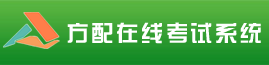
<style>
.page{position:relative;width:269px;height:65px}
.page>*{position:absolute;margin:0}
.t1{font:22.5px "FZZYJW--GB1-0";letter-spacing:0.1em;color:#ffffff}
</style>
<div class="page">
<p class="t1" style="left:67px;top:22px;width:194px;height:22px">方配在线考试系统</p>
</div>
